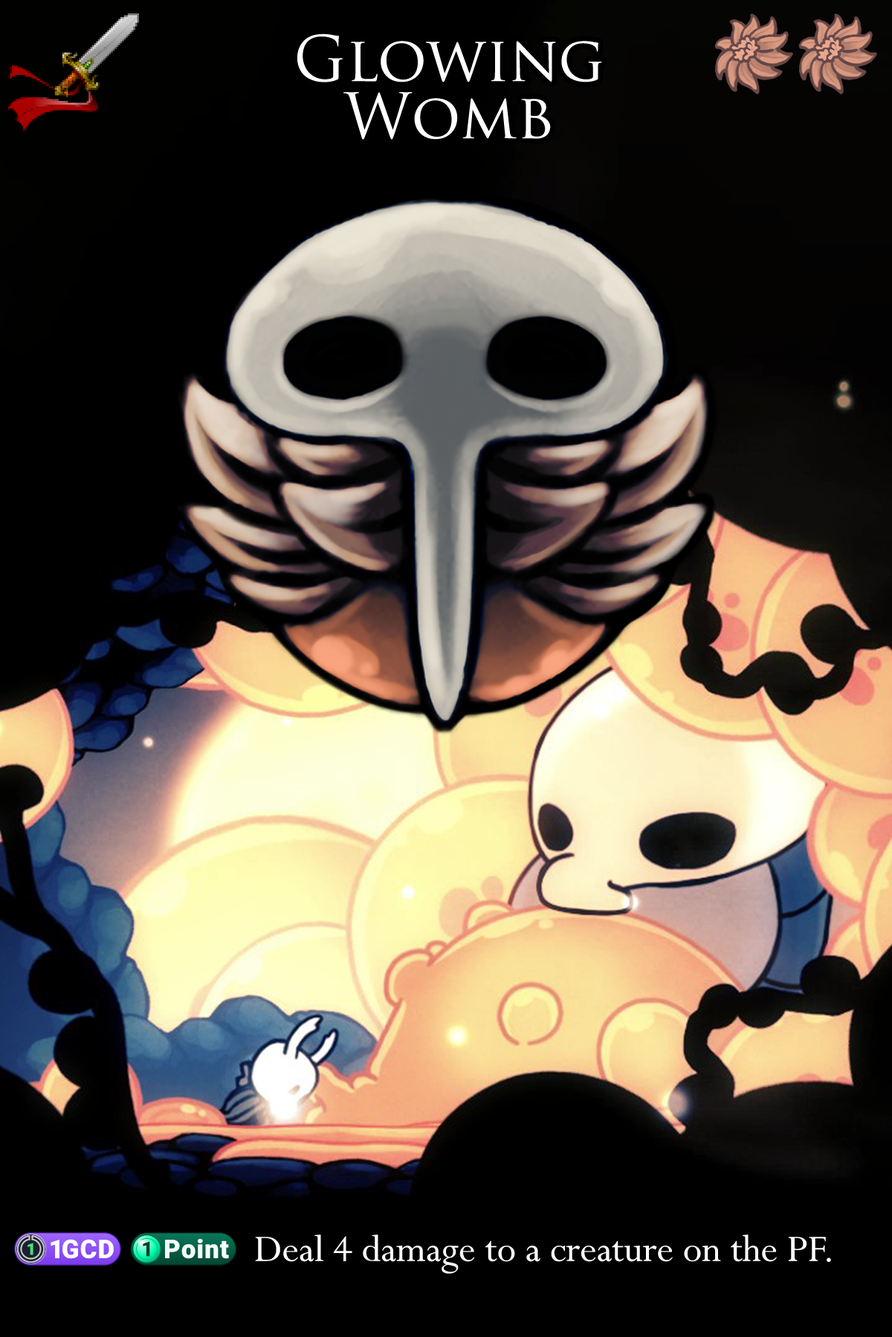
<style>
.page{position:relative;width:892px;height:1337px;background:#000000}
.page>*{position:absolute;margin:0}
.t1{font:104.8px/57.2px "TrajanPro-Regular";color:#ffffff}
.t2{font:71.3px "Perpetua"}
.t3{font:58.1px "stoogedings-Regular";letter-spacing:0.225em}
</style>
<div class="page">
<p class="t1" style="left:296px;top:33px;width:306px;height:107px;text-align:center">Glowing<br>Womb</p>
<p class="t2" style="left:14px;top:1233px;width:817px;height:41px"><span class="t3">(1GCD)(1 point)</span> Deal 4 damage to a creature on the PF.</p>
</div>
